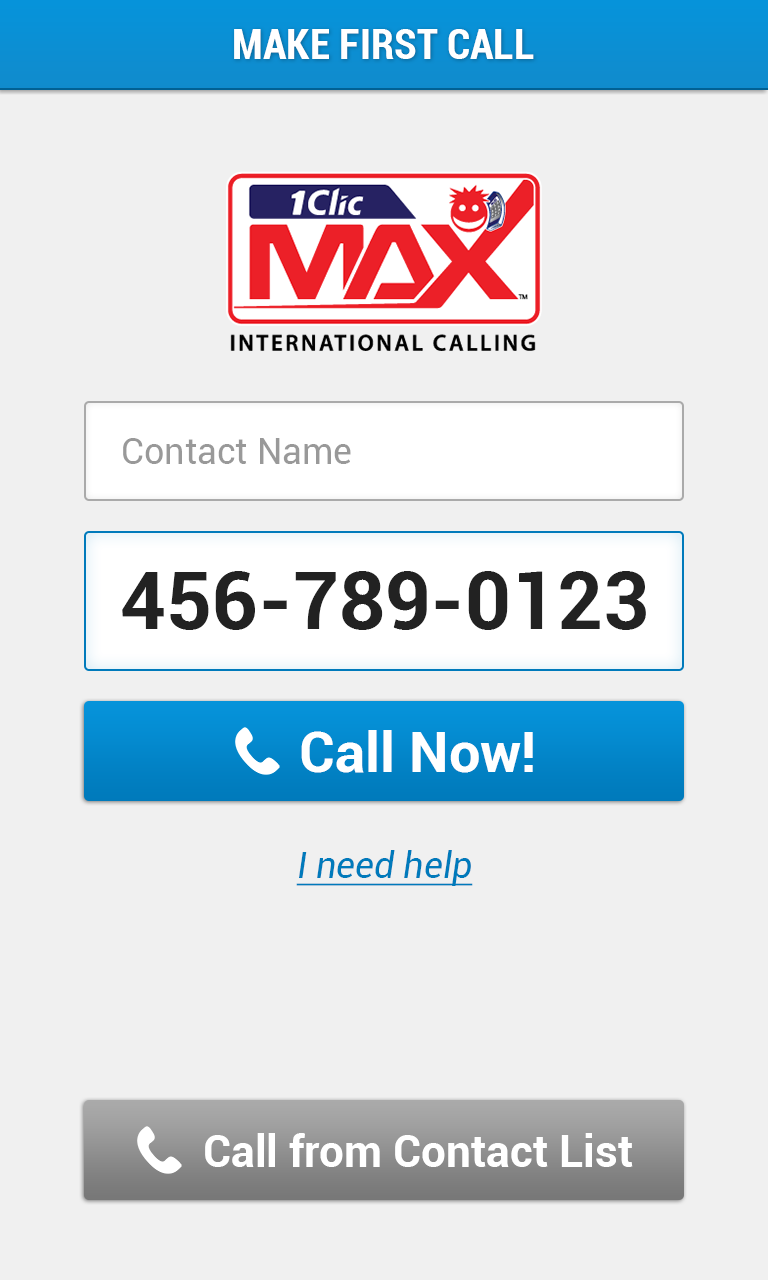
<style>
.page{position:relative;width:768px;height:1280px;background:#f0f0f0}
.page>*{position:absolute;margin:0}
.t1{font:42px "Roboto-BoldCondensed";color:#ffffff}
.t2{font:36px "Roboto-Regular";color:#999999}
.t3{font:80px "Roboto-Bold";color:#222222}
.t4{font:56px "Roboto-Bold";color:#ffffff}
.t5{font:36px "Roboto-Italic";color:#007abb;text-decoration:underline}
.t6{font:44px "Roboto-Bold";color:#ffffff}
</style>
<div class="page">
<p class="t1" style="left:234px;top:29px;width:300px;height:30px">MAKE FIRST CALL</p>
<p class="t2" style="left:123px;top:438px;width:228px;height:26px">Contact Name</p>
<p class="t3" style="left:122px;top:571px;width:524px;height:59px">456-789-0123</p>
<p class="t4" style="left:301px;top:730px;width:232px;height:43px">Call Now!</p>
<p class="t5" style="left:296px;top:850px;width:177px;height:36px">I need help</p>
<p class="t6" style="left:205px;top:1133px;width:428px;height:34px">Call from Contact List</p>
</div>
